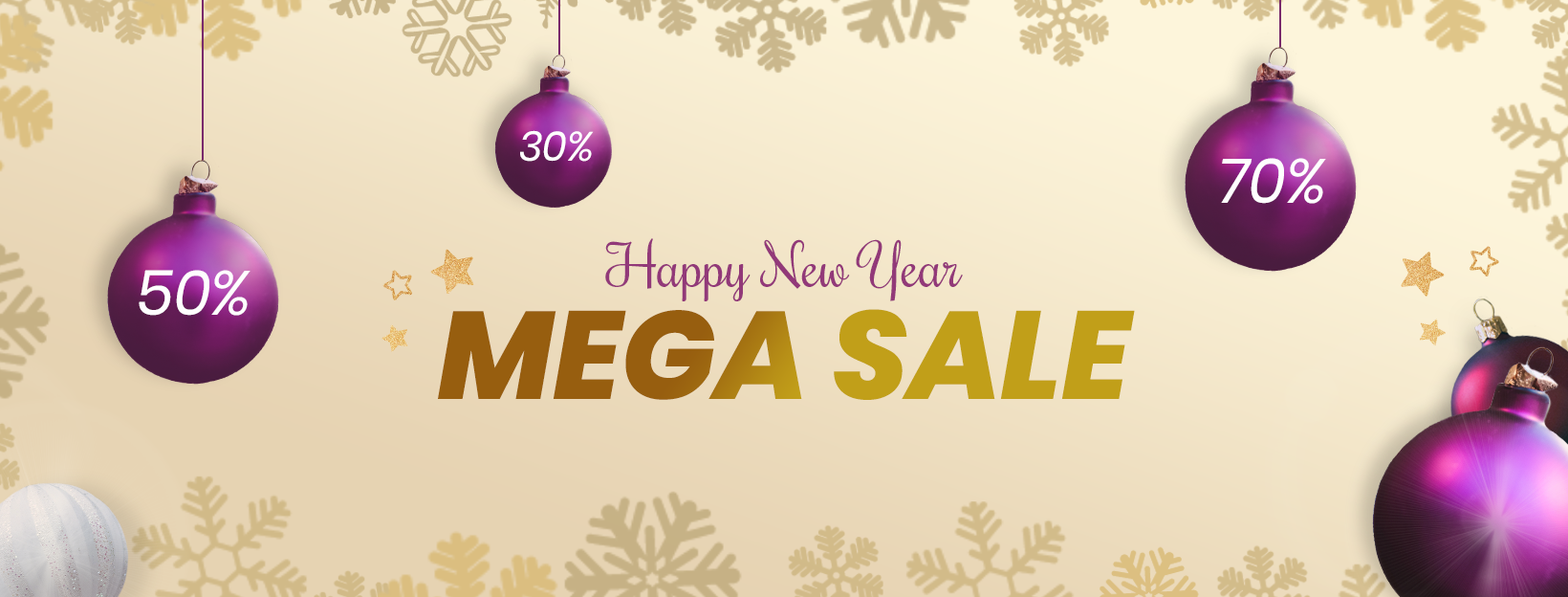
<style>
.page{position:relative;width:1568px;height:597px}
.page>*{position:absolute;margin:0}
.t1{font:41.1px "Poppins-Italic";color:#fefefe}
.t2{font:62.1px "Poppins-Italic";color:#fefefe}
.t3{font:57.4px "Rochester-Regular";color:#923979}
.t4{font:124.3px "Poppins-ExtraBoldItalic"}
</style>
<div class="page">
<p class="t1" style="left:520px;top:130px;width:74px;height:32px">30%</p>
<p class="t2" style="left:1221px;top:158px;width:105px;height:46px">70%</p>
<p class="t3" style="left:605px;top:238px;width:358px;height:63px">Happy New Year</p>
<p class="t2" style="left:139px;top:270px;width:111px;height:46px">50%</p>
<p class="t4" style="left:438px;top:309px;width:697px;height:91px">MEGA SALE</p>
</div>
